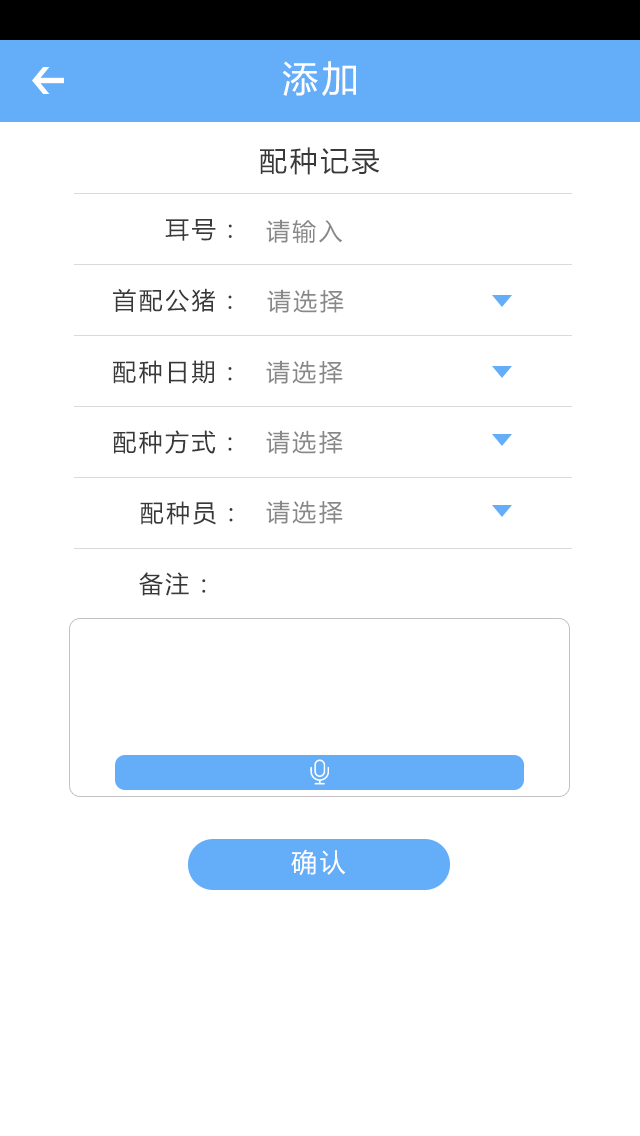
<style>
.page{position:relative;width:640px;height:1136px;background:#ffffff}
.page>*{position:absolute;margin:0}
.t1{font:36px "MicrosoftYaHei";letter-spacing:0.1em;color:#ffffff}
.t2{font:28px "MicrosoftYaHei";letter-spacing:0.1em;color:#3a3939}
.t3{font:24px "MicrosoftYaHei";letter-spacing:0.1em;color:#3a3939}
.t4{font:24px "MicrosoftYaHei";letter-spacing:0.1em;color:#898888}
.t5{font:26px "MicrosoftYaHei";letter-spacing:0.1em;color:#ffffff}
</style>
<div class="page">
<p class="t1" style="left:282px;top:61px;width:74px;height:35px">添加</p>
<p class="t2" style="left:260px;top:147px;width:120px;height:28px">配种记录</p>
<p class="t3" style="left:165px;top:219px;width:67px;height:22px">耳号：</p>
<p class="t4" style="left:266px;top:219px;width:77px;height:24px">请输入</p>
<p class="t3" style="left:113px;top:288px;width:119px;height:24px">首配公猪：</p>
<p class="t4" style="left:267px;top:289px;width:77px;height:24px">请选择</p>
<p class="t3" style="left:113px;top:360px;width:119px;height:24px">配种日期：</p>
<p class="t4" style="left:266px;top:360px;width:77px;height:24px">请选择</p>
<p class="t3" style="left:113px;top:430px;width:119px;height:24px">配种方式：</p>
<p class="t4" style="left:266px;top:430px;width:77px;height:24px">请选择</p>
<p class="t3" style="left:140px;top:501px;width:93px;height:24px">配种员：</p>
<p class="t4" style="left:266px;top:500px;width:77px;height:24px">请选择</p>
<p class="t3" style="left:139px;top:572px;width:67px;height:24px">备注：</p>
<p class="t5" style="left:291px;top:849px;width:55px;height:27px">确认</p>
</div>
